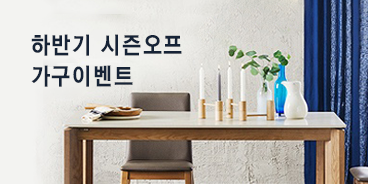
<style>
.page{position:relative;width:368px;height:184px}
.page>*{position:absolute;margin:0}
.t1{font:24.2px/31px "THELuxGoEB";letter-spacing:0.075em;color:#162336;scale:0.86 1}
</style>
<div class="page">
<p class="t1" style="left:31px;top:34px;width:151px;height:53px">하반기 시즌오프<br>가구이벤트</p>
</div>
